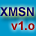
<style>
.page{position:relative;width:36px;height:36px}
.page>*{position:absolute;margin:0}
.t1{font:12px "Arial-BoldMT";color:#000066}
.t2{font:12px "Arial-BoldMT";color:#990000}
</style>
<div class="page">
<p class="t1" style="left:0px;top:7px;width:34px;height:10px">XMSN</p>
<p class="t2" style="left:11px;top:21px;width:24px;height:9px">v1.o</p>
</div>
